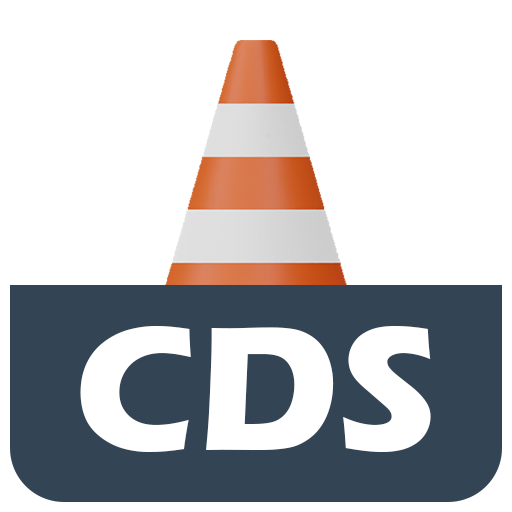
<style>
.page{position:relative;width:512px;height:512px;background:#ffffff}
.page>*{position:absolute;margin:0}
.t1{font:183.3px "ErasITC-Bold";color:#ffffff}
</style>
<div class="page">
<p class="t1" style="left:80px;top:326px;width:351px;height:126px">CDS</p>
</div>
